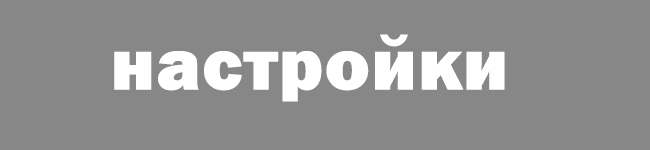
<style>
.page{position:relative;width:650px;height:150px;background:#878787}
.page>*{position:absolute;margin:0}
.t1{font:75px "FranklinGothic-Heavy";color:#ffffff;font-weight:bold}
</style>
<div class="page">
<p class="t1" style="left:114px;top:34px;width:391px;height:68px">настройки</p>
</div>
